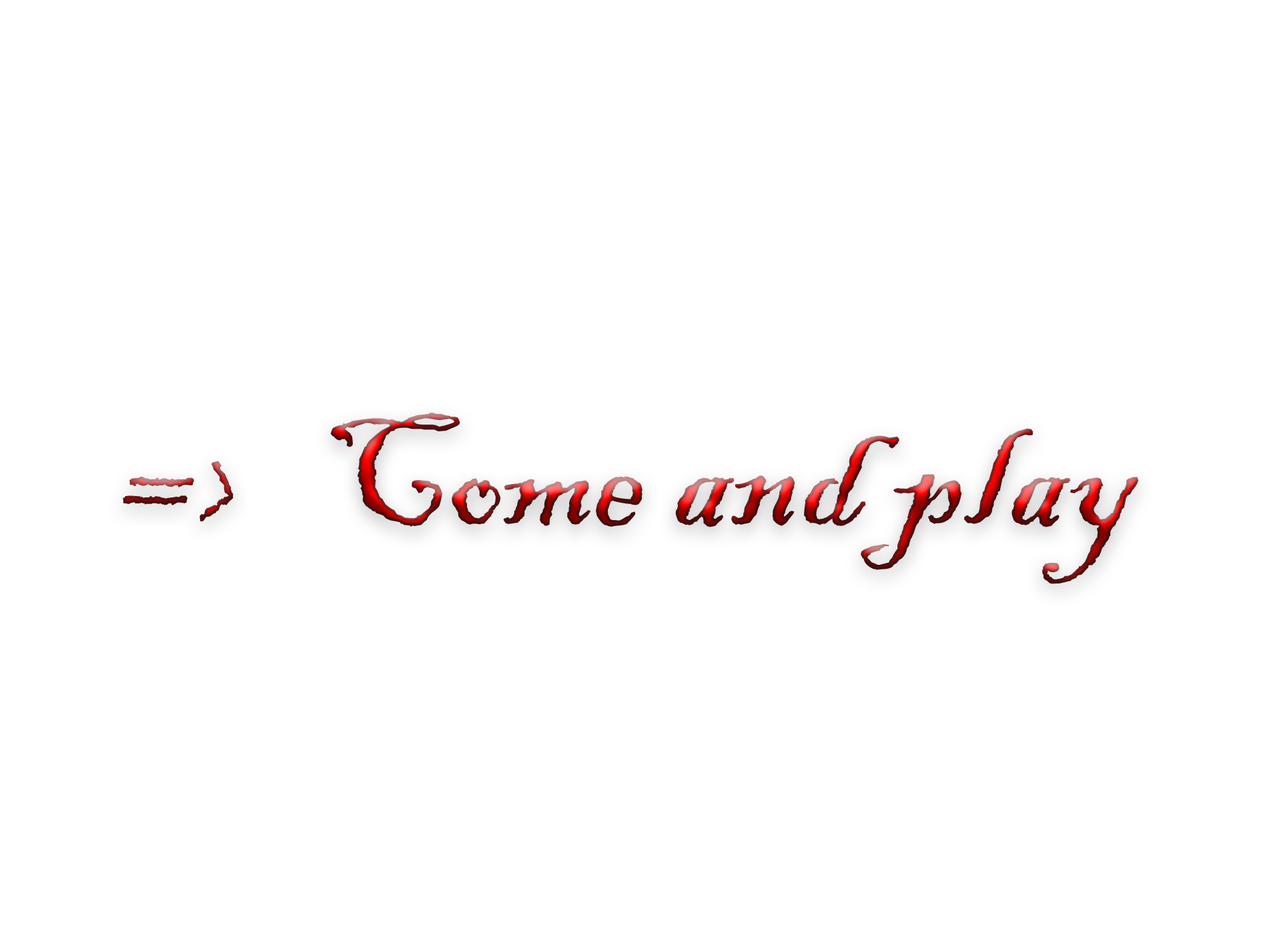
<style>
.page{position:relative;width:1261px;height:946px;background:#ffffff}
.page>*{position:absolute;margin:0}
.t1{font:166.8px "BlackadderITC-Regular"}
</style>
<div class="page">
<p class="t1" style="left:123px;top:412px;width:1016px;height:172px">=&gt;   Come and play</p>
</div>
